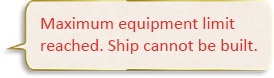
<style>
.page{position:relative;width:274px;height:78px}
.page>*{position:absolute;margin:0}
.t1{font:18px "Calibri";color:#e52e27}
</style>
<div class="page">
<p class="t1" style="left:41px;top:17px;width:216px;height:37px">Maximum equipment limit<br>reached. Ship cannot be built.</p>
</div>
